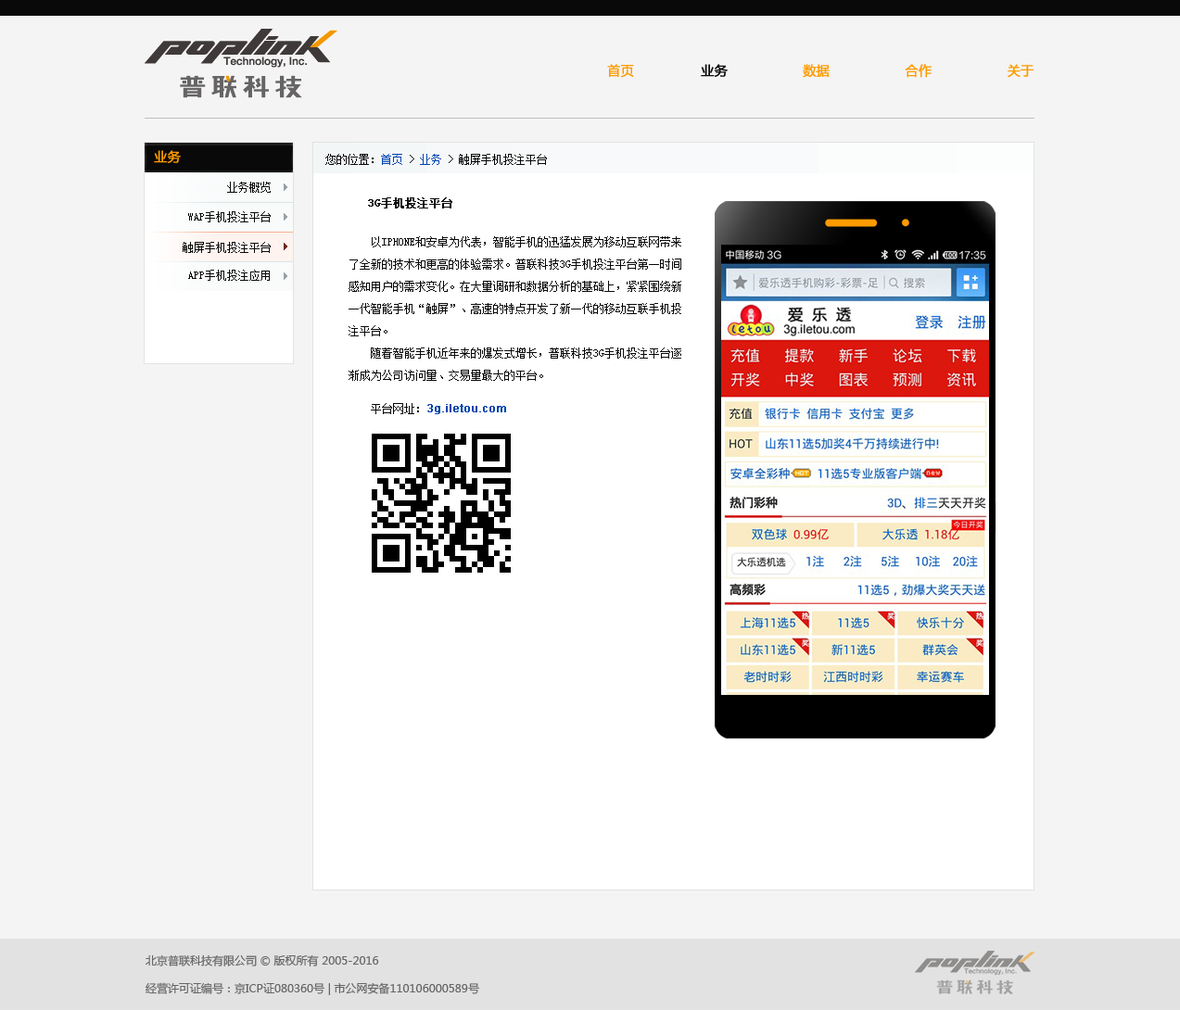
<style>
.page{position:relative;width:1180px;height:1010px;background:#f4f4f4}
.page>*{position:absolute;margin:0}
.t1{font:13px "MicrosoftYaHei";color:#fe9b00;text-transform:uppercase;font-weight:bold}
.t2{font:13px "MicrosoftYaHei";color:#090909;text-transform:uppercase;font-weight:bold}
.t3{font:13px "MicrosoftYaHei";color:#fe9b00;font-weight:bold}
.t4{font:11.1px "SimSun";color:#090909;text-transform:uppercase}
.t5{font:11.1px "SimSun";color:#0146af;text-transform:uppercase}
.t6{font:11.1px/22.2px "SimSun";color:#090909;text-transform:uppercase}
.t7{font:11.1px/16.7px "SimSun";color:#090909;text-transform:uppercase;font-weight:bold}
.t8{font:11.1px/16.7px "SimSun";color:#090909;text-transform:uppercase}
.t9{font:11.1px/16.7px "ArialMT";color:#0146af;font-weight:bold}
.t10{font:11.1px/27.8px "MicrosoftYaHei";color:#666666}
</style>
<div class="page">
<p class="t1" style="left:607px;top:64px;width:427px;height:14px">首页 <span class="t2">               业务 </span>                 数据                  合作                  关于</p>
<p class="t3" style="left:154px;top:150px;width:27px;height:13px">业务</p>
<p class="t4" style="left:325px;top:154px;width:222px;height:11px">您的位置：<span class="t5">首页 </span>&gt; <span class="t5">业务</span> &gt; 触屏手机投注平台</p>
<p class="t4" style="left:227px;top:182px;width:44px;height:11px">业务概览</p>
<p class="t6" style="left:349px;top:197px;width:332px;height:217px"><span class="t7">   3G手机投注平台<br><br></span>    以iphone和安卓为代表，智能手机的迅猛发展为移动互联网带来<br>了全新的技术和更高的体验需求。普联科技3G手机投注平台第一时间<br>感知用户的需求变化。在大量调研和数据分析的基础上，紧紧围绕新<br>一代智能手机“触屏”、高速的特点开发了新一代的移动互联手机投<br>注平台。<br>    随着智能手机近年来的爆发式增长，普联科技3G手机投注平台逐<br>渐成为公司访问量、交易量最大的平台。<br><span class="t8">    <br>    平台网址：</span><span class="t9">3g.iletou.com</span></p>
<p class="t4" style="left:188px;top:211px;width:83px;height:11px">WAP手机投注平台</p>
<p class="t4" style="left:183px;top:242px;width:88px;height:11px">触屏手机投注平台</p>
<p class="t4" style="left:188px;top:270px;width:82px;height:11px">App手机投注应用</p>
<p class="t10" style="left:146px;top:955px;width:334px;height:41px">北京普联科技有限公司 © 版权所有 2005-2016<br>经营许可证编号：京ICP证080360号 | 市公网安备110106000589号</p>
</div>
